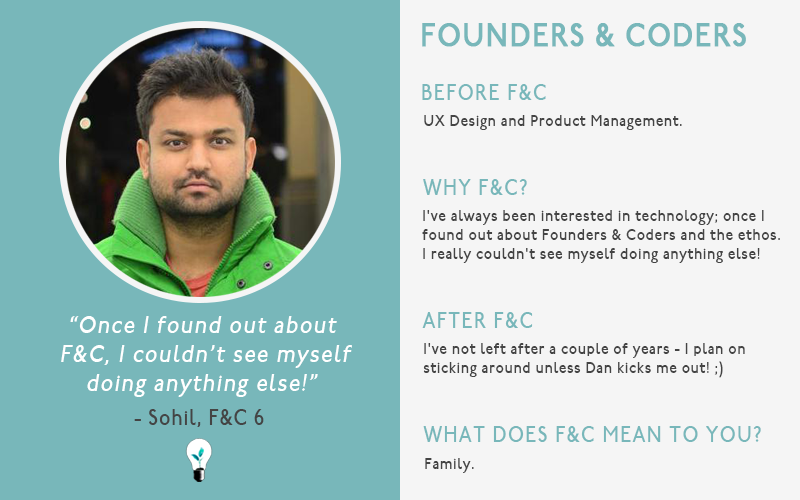
<style>
.page{position:relative;width:800px;height:500px;background:#f5f5f5}
.page>*{position:absolute;margin:0}
.t1{font:32px "P22UndergroundMedium";letter-spacing:0.05em;color:#78b7ba;font-weight:bold;scale:0.86 1}
.t2{font:22px "P22UndergroundMedium";letter-spacing:0.075em;color:#78b7ba;scale:0.86 1}
.t3{font:16px "P22UndergroundMedium";letter-spacing:0.05em;color:#444444;scale:0.86 1}
.t4{font:24px "P22UndergroundMedium";letter-spacing:0.075em;color:#ffffff;font-style:italic;scale:0.86 1}
.t5{font:22px "P22UndergroundMedium";letter-spacing:0.05em;color:#444444;scale:0.86 1}
</style>
<div class="page">
<p class="t1" style="left:422px;top:23px;width:324px;height:24px">FOUNDERS &amp; CODERS</p>
<p class="t2" style="left:422px;top:84px;width:124px;height:16px">BEFORE F&amp;C</p>
<p class="t3" style="left:424px;top:115px;width:258px;height:15px">UX Design and Product Management.</p>
<p class="t2" style="left:423px;top:179px;width:104px;height:16px">WHY F&amp;C?</p>
<p class="t3" style="left:422px;top:210px;width:358px;height:53px">I've always been interested in technology; once I <br>found out about Founders &amp; Coders and the ethos. <br>I really couldn't see myself doing anything else!</p>
<p class="t4" style="left:61px;top:316px;width:291px;height:81px;text-align:center">“Once I found out about<br> F&amp;C, I couldn’t see myself<br>doing anything else!”</p>
<p class="t2" style="left:422px;top:312px;width:111px;height:16px">AFTER F&amp;C</p>
<p class="t3" style="left:423px;top:343px;width:322px;height:35px">I've not left after a couple of years - I plan on <br>sticking around unless Dan kicks me out! ;)</p>
<p class="t5" style="left:134px;top:409px;width:130px;height:18px">- Sohil, F&amp;C 6</p>
<p class="t2" style="left:423px;top:426px;width:338px;height:16px">WHAT DOES F&amp;C MEAN TO YOU?</p>
<p class="t3" style="left:425px;top:458px;width:49px;height:15px">Family.</p>
</div>
